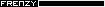
<style>
.page{position:relative;width:105px;height:7px;background:#000000}
.page>*{position:absolute;margin:0}
.t1{font:10px "VisitorTT1BRK";color:#ffffff}
</style>
<div class="page">
<p class="t1" style="left:1px;top:1px;width:35px;height:5px">frenzy</p>
</div>
